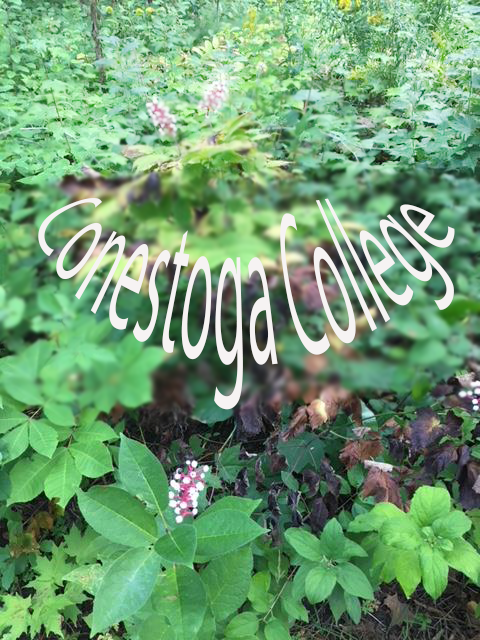
<style>
.page{position:relative;width:480px;height:640px}
.page>*{position:absolute;margin:0}
.t1{font:48px "MyriadPro-Regular";color:#f6f3f3}
</style>
<div class="page">
<p class="t1" style="left:38px;top:198px;width:417px;height:212px">Conestoga College</p>
</div>
